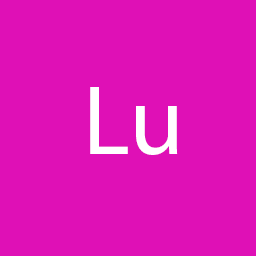
<style>
.page{position:relative;width:256px;height:256px;background:#df10b6}
.page>*{position:absolute;margin:0}
.t1{font:100px "MyriadPro-Regular";color:#ffffff}
</style>
<div class="page">
<p class="t1" style="left:90px;top:87px;width:88px;height:68px">Lu</p>
</div>
